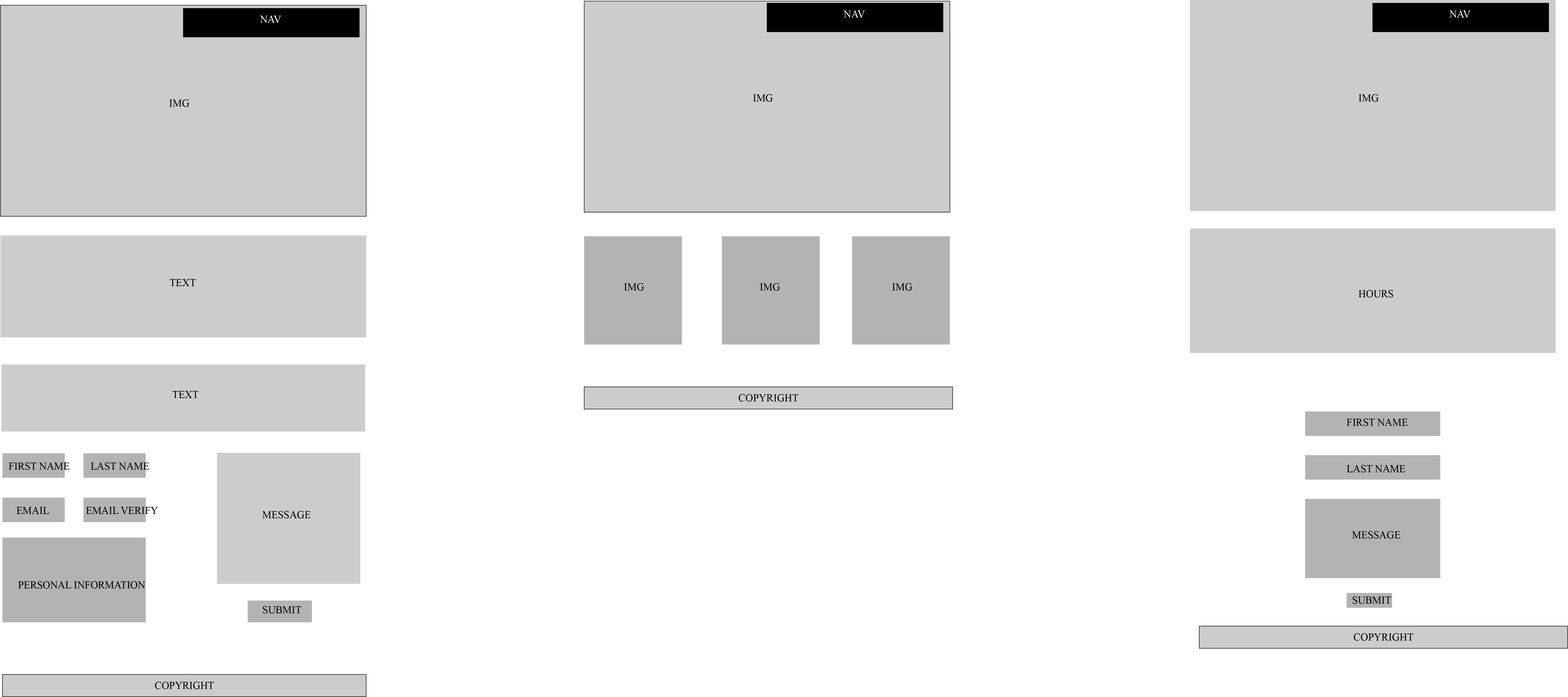
<style>
.page{position:relative;width:1568px;height:697px;background:#ffffff}
.page>*{position:absolute;margin:0}
.t1{font:10.4px "MyriadPro-Regular";color:#ffffff}
.t2{font:10.4px "MyriadPro-Regular";color:#000000}
</style>
<div class="page">
<p class="t1" style="left:260px;top:15px;width:21px;height:8px">NAV</p>
<p class="t1" style="left:843px;top:10px;width:22px;height:8px">NAV</p>
<p class="t1" style="left:1449px;top:10px;width:22px;height:8px">NAV</p>
<p class="t2" style="left:169px;top:99px;width:20px;height:8px">IMG</p>
<p class="t2" style="left:753px;top:94px;width:20px;height:8px">IMG</p>
<p class="t2" style="left:1359px;top:94px;width:20px;height:8px">IMG</p>
<p class="t2" style="left:170px;top:279px;width:26px;height:7px">TEXT</p>
<p class="t2" style="left:624px;top:283px;width:20px;height:8px">IMG</p>
<p class="t2" style="left:760px;top:283px;width:20px;height:8px">IMG</p>
<p class="t2" style="left:892px;top:283px;width:20px;height:8px">IMG</p>
<p class="t2" style="left:1358px;top:290px;width:35px;height:8px">HOURS</p>
<p class="t2" style="left:172px;top:391px;width:26px;height:7px">TEXT</p>
<p class="t2" style="left:739px;top:394px;width:59px;height:8px">COPYRIGHT</p>
<p class="t2" style="left:1347px;top:418px;width:61px;height:8px">FIRST NAME</p>
<p class="t2" style="left:9px;top:462px;width:60px;height:8px">FIRST NAME</p>
<p class="t2" style="left:91px;top:462px;width:58px;height:8px">LAST NAME</p>
<p class="t2" style="left:1347px;top:465px;width:58px;height:8px">LAST NAME</p>
<p class="t2" style="left:16px;top:507px;width:33px;height:7px">EMAIL</p>
<p class="t2" style="left:86px;top:507px;width:72px;height:7px">EMAIL VERIFY</p>
<p class="t2" style="left:262px;top:511px;width:49px;height:8px">MESSAGE</p>
<p class="t2" style="left:1352px;top:531px;width:48px;height:8px">MESSAGE</p>
<p class="t2" style="left:18px;top:581px;width:127px;height:8px">PERSONAL INFORMATION</p>
<p class="t2" style="left:1352px;top:596px;width:39px;height:8px">SUBMIT</p>
<p class="t2" style="left:263px;top:606px;width:38px;height:8px">SUBMIT</p>
<p class="t2" style="left:1354px;top:633px;width:59px;height:8px">COPYRIGHT</p>
<p class="t2" style="left:155px;top:682px;width:59px;height:7px">COPYRIGHT</p>
</div>
